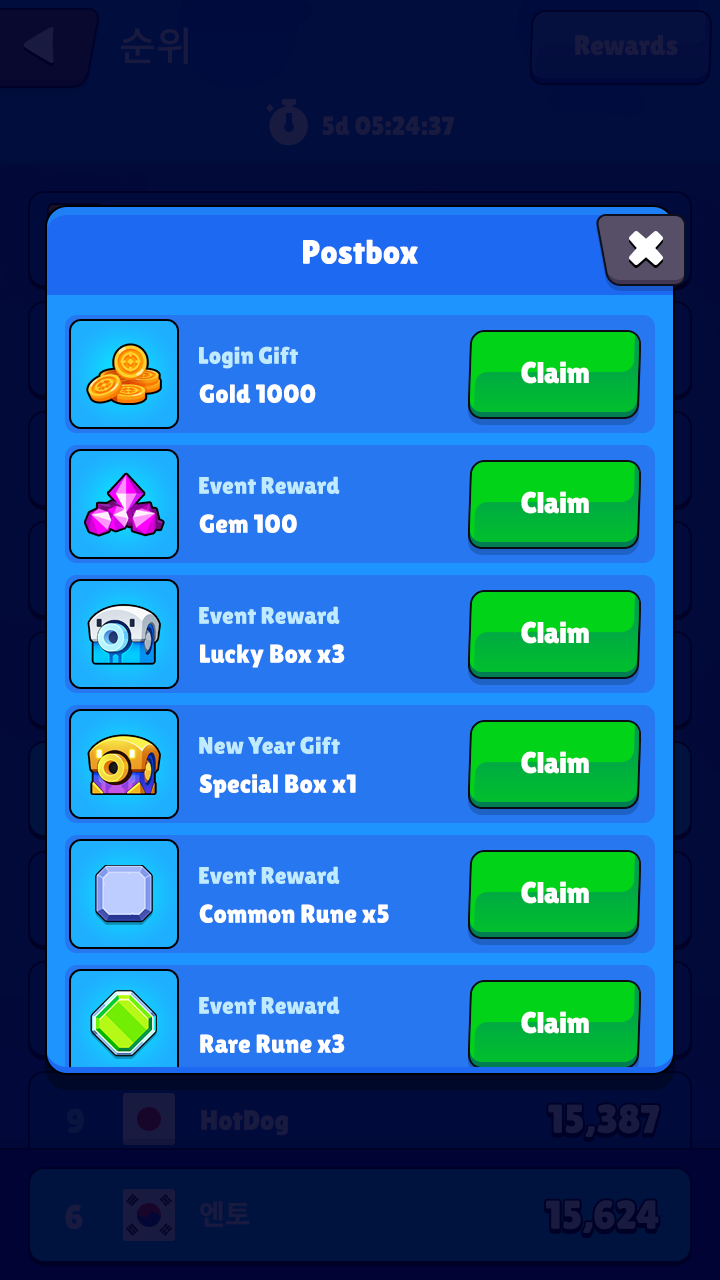
<style>
.page{position:relative;width:720px;height:1280px;background:#2677f0}
.page>*{position:absolute;margin:0}
.t1{font:34px "LilitaOne";color:#ffffff}
.t2{font:24px "LilitaOne";color:#c0ebff}
.t3{font:30px "LilitaOne";color:#ffffff}
.t4{font:26px "LilitaOne";color:#ffffff}
</style>
<div class="page">
<p class="t1" style="left:303px;top:239px;width:115px;height:25px">Postbox</p>
<p class="t2" style="left:199px;top:346px;width:99px;height:23px">Login Gift</p>
<p class="t3" style="left:521px;top:361px;width:68px;height:23px">Claim</p>
<p class="t4" style="left:199px;top:384px;width:117px;height:19px">Gold 1000</p>
<p class="t2" style="left:199px;top:476px;width:141px;height:18px">Event Reward</p>
<p class="t3" style="left:521px;top:491px;width:68px;height:23px">Claim</p>
<p class="t4" style="left:199px;top:514px;width:98px;height:19px">Gem 100</p>
<p class="t2" style="left:199px;top:606px;width:141px;height:18px">Event Reward</p>
<p class="t3" style="left:521px;top:621px;width:68px;height:23px">Claim</p>
<p class="t4" style="left:200px;top:644px;width:145px;height:24px">Lucky Box x3</p>
<p class="t2" style="left:199px;top:736px;width:141px;height:18px">New Year Gift</p>
<p class="t3" style="left:521px;top:751px;width:68px;height:23px">Claim</p>
<p class="t4" style="left:199px;top:774px;width:157px;height:24px">Special Box x1</p>
<p class="t2" style="left:199px;top:866px;width:141px;height:18px">Event Reward</p>
<p class="t3" style="left:521px;top:881px;width:68px;height:23px">Claim</p>
<p class="t4" style="left:199px;top:904px;width:190px;height:19px">Common Rune x5</p>
<p class="t2" style="left:199px;top:996px;width:141px;height:18px">Event Reward</p>
<p class="t3" style="left:521px;top:1011px;width:68px;height:23px">Claim</p>
<p class="t4" style="left:200px;top:1034px;width:145px;height:19px">Rare Rune x3</p>
</div>
